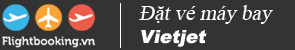
<style>
.page{position:relative;width:295px;height:50px;background:#333333}
.page>*{position:absolute;margin:0}
.t1{font:21px "TimesNewRomanPSMT";color:#fdfdfd;font-style:italic}
.t2{font:18px "Arial-Black";color:#fdfdfd;font-style:italic}
</style>
<div class="page">
<p class="t1" style="left:139px;top:5px;width:134px;height:19px">Đặt vé máy bay</p>
<p class="t2" style="left:141px;top:30px;width:66px;height:17px">Vietjet</p>
</div>
